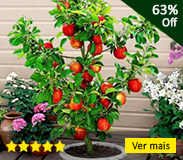
<style>
.page{position:relative;width:183px;height:160px}
.page>*{position:absolute;margin:0}
.t1{font:14.2px "Calibri-Light";color:#ffffff;font-weight:bold}
.t2{font:12px "Calibri-Light";color:#ffffff;font-weight:bold;scale:0.97 1}
.t3{font:11.1px "Calibri-Light";color:#000000;font-weight:bold;scale:0.94 1}
</style>
<div class="page">
<p class="t1" style="left:152px;top:4px;width:26px;height:11px">63%</p>
<p class="t2" style="left:162px;top:17px;width:16px;height:10px">Off</p>
<p class="t3" style="left:132px;top:141px;width:38px;height:9px">Ver mais</p>
</div>
